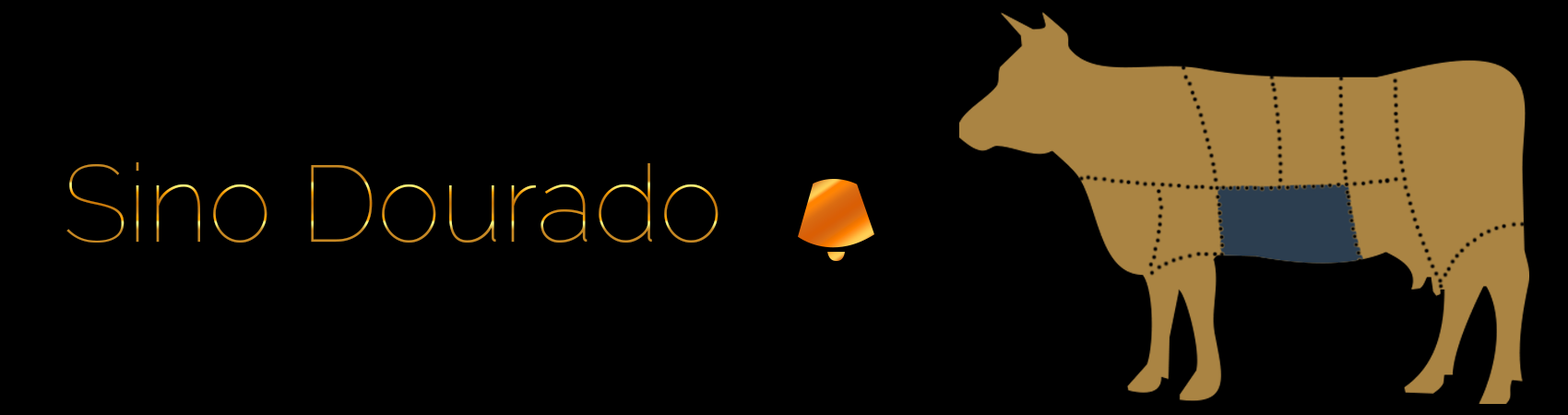
<style>
.page{position:relative;width:1568px;height:415px;background:#000000}
.page>*{position:absolute;margin:0}
.t1{font:108.1px "Raleway-Thin"}
</style>
<div class="page">
<p class="t1" style="left:66px;top:162px;width:653px;height:81px">Sino Dourado</p>
</div>
